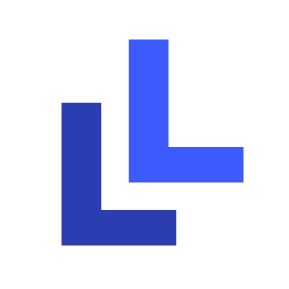
<style>
.page{position:relative;width:289px;height:289px;background:#ffffff}
.page>*{position:absolute;margin:0}
.t1{font:184px "PRIMETIME-Regular";color:#3d5afe}
.t2{font:184px "PRIMETIME-Regular";color:#2a3eb1}
</style>
<div class="page">
<p class="t1" style="left:128px;top:39px;width:116px;height:144px">L</p>
<p class="t2" style="left:61px;top:102px;width:116px;height:144px">L</p>
</div>
